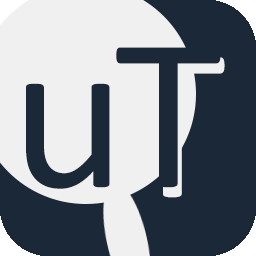
<style>
.page{position:relative;width:256px;height:256px;background:#1b2838}
.page>*{position:absolute;margin:0}
.t1{font:220px "Calibri";letter-spacing:-0.05em;color:#1b2838}
</style>
<div class="page">
<p class="t1" style="left:26px;top:47px;width:195px;height:142px">uT</p>
</div>
